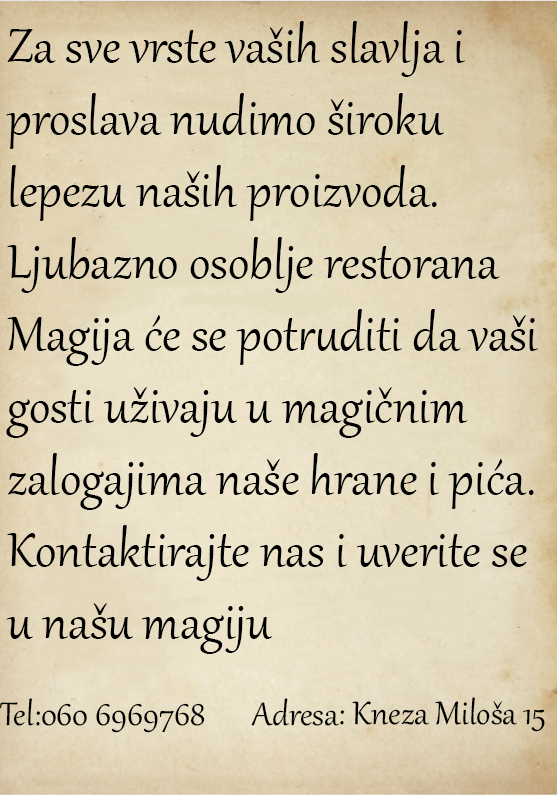
<style>
.page{position:relative;width:557px;height:795px}
.page>*{position:absolute;margin:0}
.t1{font:60px "Gabriola";color:#000000}
.t2{font:40px "Gabriola";color:#000000}
</style>
<div class="page">
<p class="t1" style="left:6px;top:21px;width:532px;height:633px">Za sve vrste vaših slavlja i proslava nudimo široku lepezu naših proizvoda.   Ljubazno osoblje restorana Magija će se potruditi da vaši gosti uživaju u magičnim zalogajima naše hrane i pića. Kontaktirajte nas i uverite se u našu magiju</p>
<p class="t2" style="left:0px;top:697px;width:545px;height:36px">Tel:060 6969768  Adresa: Kneza Miloša 15</p>
</div>
